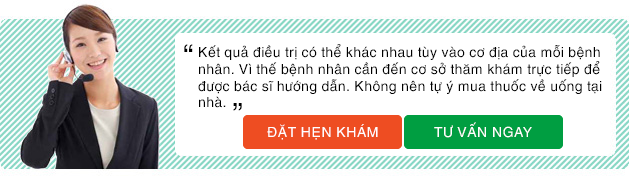
<style>
.page{position:relative;width:629px;height:186px;background:#ffffff}
.page>*{position:absolute;margin:0}
.t1{font:30px "UTM-Helve";color:#000000}
.t2{font:14px "UTM-Helve";color:#000000}
.t3{font:29.7px "UTM-Helve";color:#000000;scale:1.03 1}
.t4{font:14px "UTM-Helve";color:#ffffff}
</style>
<div class="page">
<p class="t1" style="left:184px;top:44px;width:9px;height:8px">“</p>
<p class="t2" style="left:198px;top:44px;width:404px;height:64px">Kết quả điều trị có thể khác nhau tùy vào cơ địa của mỗi bệnh nhân. Vì thế bệnh nhân cần đến cơ sở thăm khám trực tiếp để được bác sĩ hướng dẫn. Không nên tự ý mua thuốc về uống tại nhà.</p>
<p class="t3" style="left:233px;top:103px;width:9px;height:8px;rotate:180deg">“</p>
<p class="t4" style="left:267px;top:124px;width:111px;height:16px">ĐẶT HẸN KHÁM</p>
<p class="t4" style="left:434px;top:122px;width:98px;height:16px">TƯ VẤN NGAY</p>
</div>
